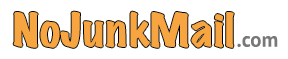
<style>
.page{position:relative;width:288px;height:59px;background:#ffffff}
.page>*{position:absolute;margin:0}
.t1{font:41.7px "MarkerFelt-Wide";color:#f7a541}
.t2{font:20.8px "PTSans-Bold";color:#787878}
</style>
<div class="page">
<p class="t1" style="left:13px;top:11px;width:221px;height:37px">NoJunkMail</p>
<p class="t2" style="left:237px;top:36px;width:41px;height:11px">.com</p>
</div>
